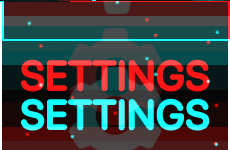
<style>
.page{position:relative;width:230px;height:150px}
.page>*{position:absolute;margin:0}
.t1{font:40px "SFRounded-Ultralight";font-weight:bold}
</style>
<div class="page">
<p class="t1" style="left:22px;top:59px;width:187px;height:31px">SETTINGS</p>
</div>
